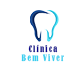
<style>
.page{position:relative;width:80px;height:80px;background:#ffffff}
.page>*{position:absolute;margin:0}
.t1{font:8.3px "BernardMT-Condensed";letter-spacing:0.15em;color:#38cfef}
.t2{font:8.3px "BernardMT-Condensed";letter-spacing:0.15em;color:#09068b}
</style>
<div class="page">
<p class="t1" style="left:21px;top:54px;width:43px;height:8px">Bem Viver</p>
<p class="t2" style="left:28px;top:44px;width:30px;height:9px">Clínica</p>
</div>
